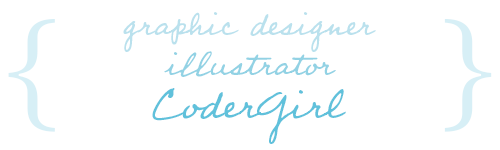
<style>
.page{position:relative;width:500px;height:150px;background:#ffffff}
.page>*{position:absolute;margin:0}
.t1{font:40px "Professor";color:#bae1ed}
.t2{font:140px "SitkaBanner";color:#d7eff6}
.t3{font:40px "Professor";color:#92d2e4}
.t4{font:50px "Professor";color:#60c1db}
</style>
<div class="page">
<p class="t1" style="left:123px;top:12px;width:253px;height:40px">graphic designer</p>
<p class="t2" style="left:8px;top:19px;width:47px;height:113px">{</p>
<p class="t2" style="left:444px;top:19px;width:48px;height:113px">}</p>
<p class="t3" style="left:164px;top:51px;width:172px;height:26px">illustrator</p>
<p class="t4" style="left:152px;top:88px;width:194px;height:56px">CoderGirl</p>
</div>
